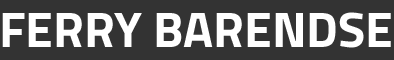
<style>
.page{position:relative;width:394px;height:60px;background:#333333}
.page>*{position:absolute;margin:0}
.t1{font:50px "Titillium-Bold";color:#ffffff;text-transform:uppercase}
</style>
<div class="page">
<p class="t1" style="left:2px;top:12px;width:389px;height:36px">Ferry Barendse</p>
</div>
